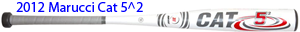
<style>
.page{position:relative;width:300px;height:32px;background:#ffffff}
.page>*{position:absolute;margin:0}
.t1{font:14px "MyriadPro-Regular";color:#0000ff}
</style>
<div class="page">
<p class="t1" style="left:16px;top:2px;width:127px;height:10px">2012 Marucci Cat 5^2</p>
</div>
